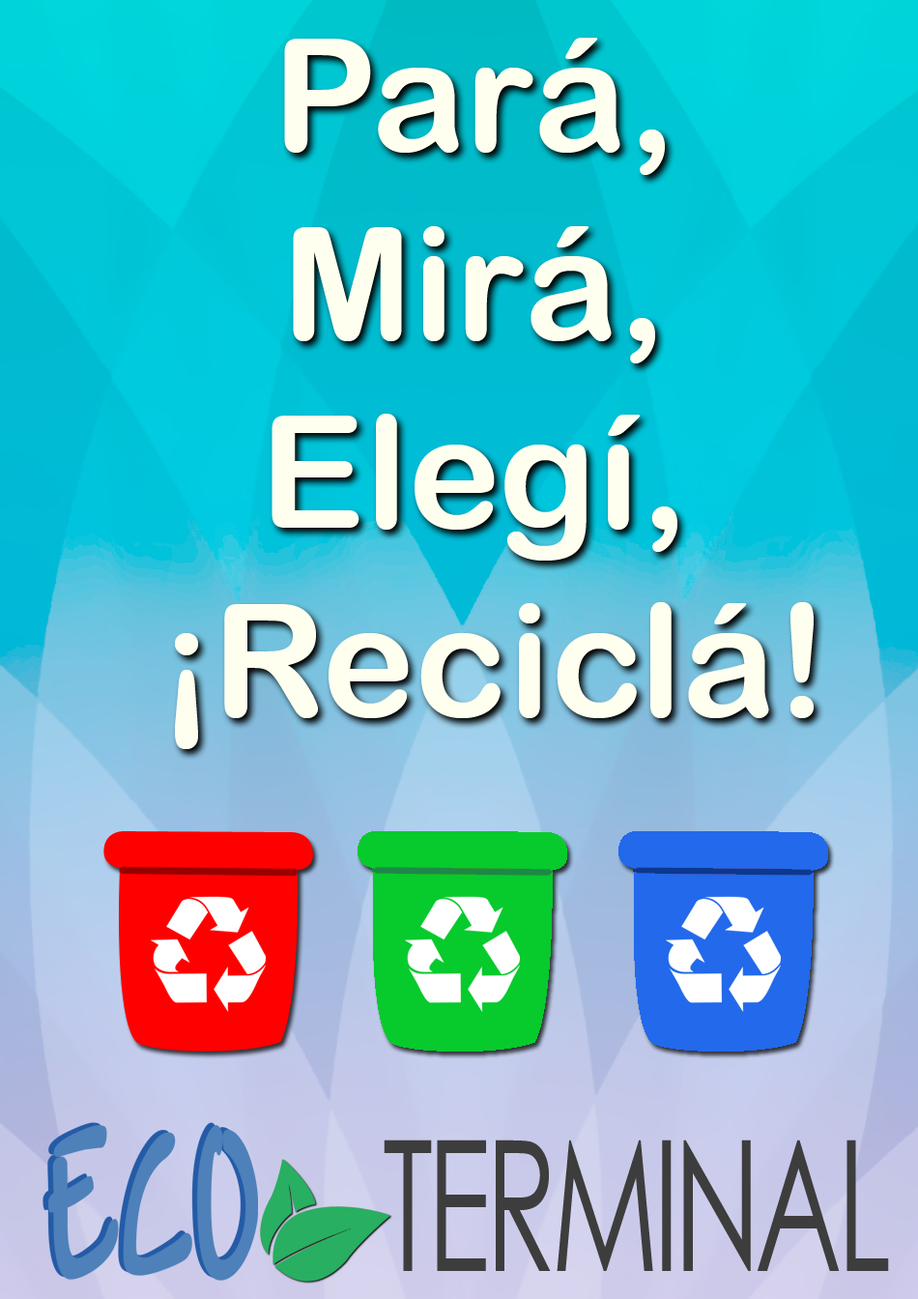
<style>
.page{position:relative;width:918px;height:1299px}
.page>*{position:absolute;margin:0}
.t1{font:157px "ArialRoundedMTBold";color:#feffef}
.t2{font:238.9px "Andy-Bold";color:#4e80b9;scale:0.54 1}
.t3{font:182px "CenturyGothic";letter-spacing:-0.05em;color:#3d3d3d;scale:0.65 1}
</style>
<div class="page">
<p class="t1" style="left:175px;top:38px;width:639px;height:711px;text-align:center">Pará, <br>Mirá, <br>Elegí, <br>¡Reciclá!</p>
<p class="t2" style="left:43px;top:1122px;width:210px;height:156px">ECO</p>
<p class="t2" style="left:48px;top:1125px;width:210px;height:155px">ECO</p>
<p class="t3" style="left:384px;top:1139px;width:505px;height:132px">TERMINAL</p>
</div>
